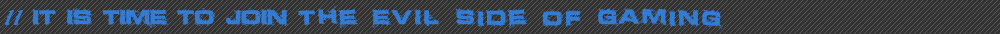
<style>
.page{position:relative;width:1000px;height:34px;background:#333333}
.page>*{position:absolute;margin:0}
.t1{font:20px "Defused-ExtendedBold";letter-spacing:0.2em;color:#327cd5}
.t2{font:20px "Defused-ExtendedBold";letter-spacing:0.05em;color:#327cd5}
.t3{font:20px "Defused-ExtendedBold";color:#327cd5;font-weight:bold}
</style>
<div class="page">
<p class="t1" style="left:31px;top:6px;width:692px;height:23px"><span class="t2"> IT IS TIME TO JOIN </span>the EVIL Side of Gaming</p>
<p class="t3" style="left:4px;top:10px;width:19px;height:16px">//</p>
</div>
